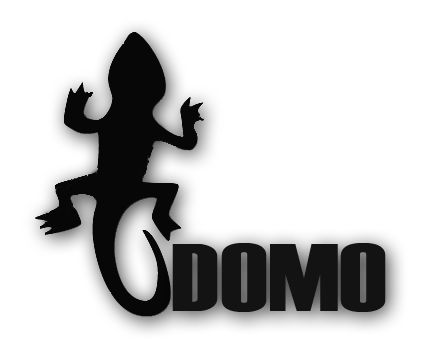
<style>
.page{position:relative;width:431px;height:361px;background:#ffffff}
.page>*{position:absolute;margin:0}
.t1{font:94.5px "Haettenschweiler";color:#141313;scale:1.33 1}
</style>
<div class="page">
<p class="t1" style="left:172px;top:243px;width:214px;height:69px">DOMO</p>
</div>
